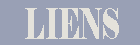
<style>
.page{position:relative;width:140px;height:45px;background:#99a0b5}
.page>*{position:absolute;margin:0}
.t1{font:41.7px "Elephant-Regular";color:#e4e2db;scale:0.6 1}
</style>
<div class="page">
<p class="t1" style="left:25px;top:8px;width:94px;height:31px">LIENS</p>
</div>
